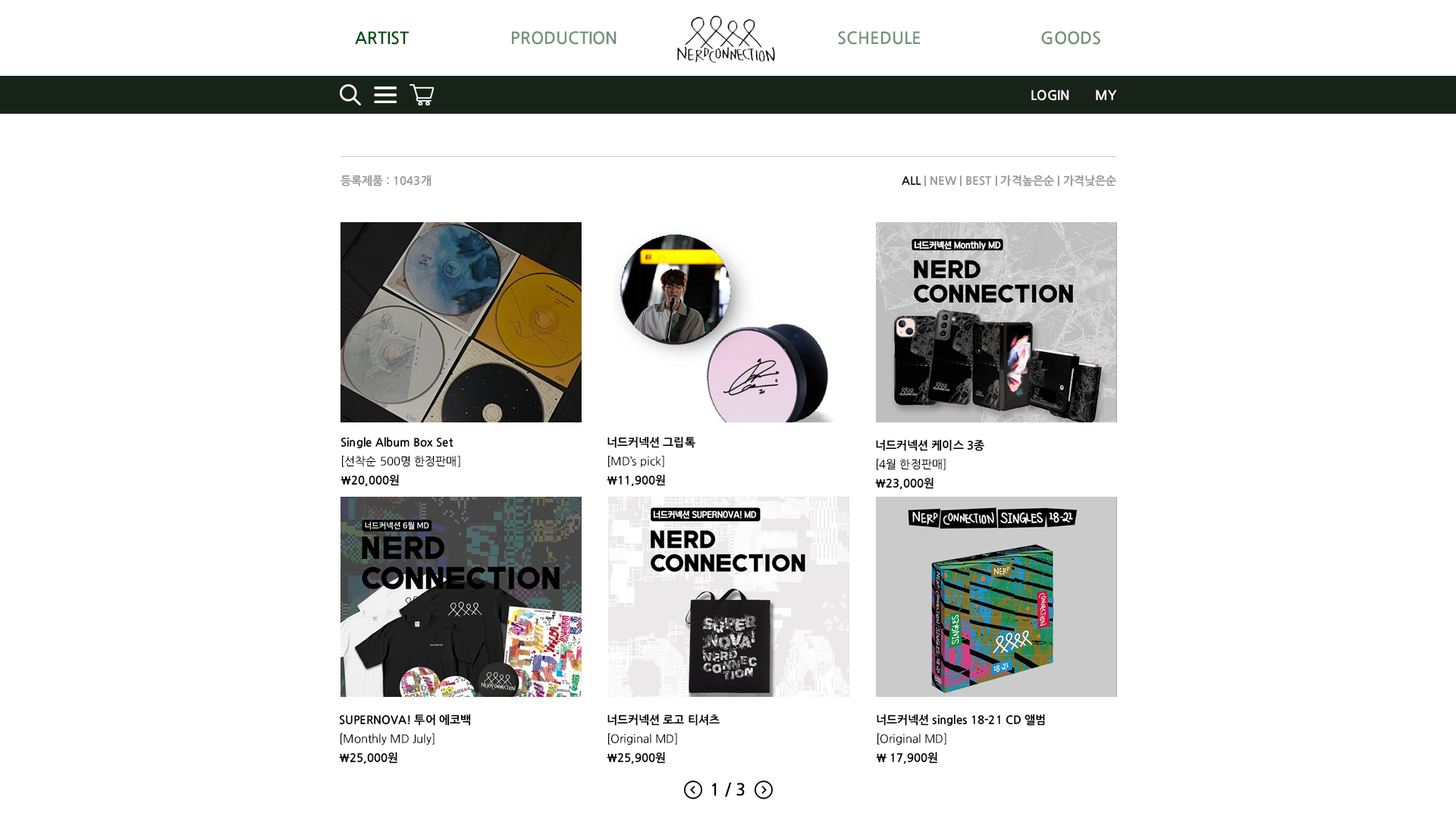
<style>
.page{position:relative;width:1456px;height:819px;background:#ffffff}
.page>*{position:absolute;margin:0}
.t1{font:16.7px "NanumGothicOTFBold";color:#005011}
.t2{font:16.7px "NanumGothicOTFBold";color:#739279}
.t3{font:12.9px "NanumGothicOTFBold";color:#ffffff}
.t4{font:11.4px "NanumGothicOTFBold";color:#999999}
.t5{font:11.4px "NanumGothicOTFBold";color:#151515}
.t6{font:11.4px/19px "NanumGothicOTFBold";color:#010101}
.t7{font:11.4px/19px "NanumGothicOTF";color:#010101}
.t8{font:16.7px "NanumGothicOTFBold";color:#000000}
</style>
<div class="page">
<p class="t1" style="left:355px;top:31px;width:54px;height:14px">ARTIST</p>
<p class="t2" style="left:512px;top:31px;width:105px;height:14px">PRODUCTION</p>
<p class="t2" style="left:838px;top:31px;width:82px;height:14px">SCHEDULE</p>
<p class="t2" style="left:1041px;top:31px;width:59px;height:14px">GOODS</p>
<p class="t3" style="left:1031px;top:89px;width:86px;height:12px">LOGIN       MY</p>
<p class="t4" style="left:340px;top:175px;width:91px;height:12px">등록제품 : 1043개</p>
<p class="t4" style="left:902px;top:175px;width:214px;height:12px"><span class="t5">ALL </span>| NEW | BEST | 가격높은순 | 가격낮은순</p>
<p class="t6" style="left:340px;top:437px;width:120px;height:49px">Single Album Box Set<br><span class="t7">[선착순 500명 한정판매]<br></span>\20,000원</p>
<p class="t7" style="left:607px;top:437px;width:88px;height:49px"><span class="t6">너드커넥션 그립톡<br></span>[MD’s pick]<br><span class="t6">\11,900원</span></p>
<p class="t6" style="left:875px;top:440px;width:109px;height:49px">너드커넥션 케이스 3종<br><span class="t7">[4월 한정판매]<br></span>\23,000원</p>
<p class="t6" style="left:339px;top:714px;width:132px;height:50px">SUPERNOVA! 투어 에코백<br><span class="t7">[Monthly MD July]<br></span>\25,000원</p>
<p class="t7" style="left:607px;top:714px;width:113px;height:50px"><span class="t6">너드커넥션 로고 티셔츠<br></span>[Original MD]<br><span class="t6">\25,900원</span></p>
<p class="t6" style="left:876px;top:714px;width:169px;height:50px">너드커넥션 singles 18-21 CD 앨범<br><span class="t7">[Original MD]<br></span>\ 17,900원</p>
<p class="t8" style="left:711px;top:783px;width:34px;height:14px">1 / 3</p>
</div>
